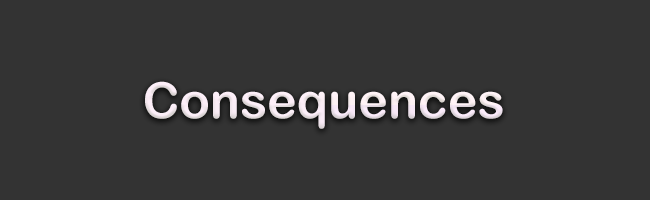
<style>
.page{position:relative;width:650px;height:200px;background:#333333}
.page>*{position:absolute;margin:0}
.t1{font:50px "ArialRoundedMTBold";color:#ffffff}
</style>
<div class="page">
<p class="t1" style="left:145px;top:81px;width:358px;height:48px">Consequences</p>
</div>
